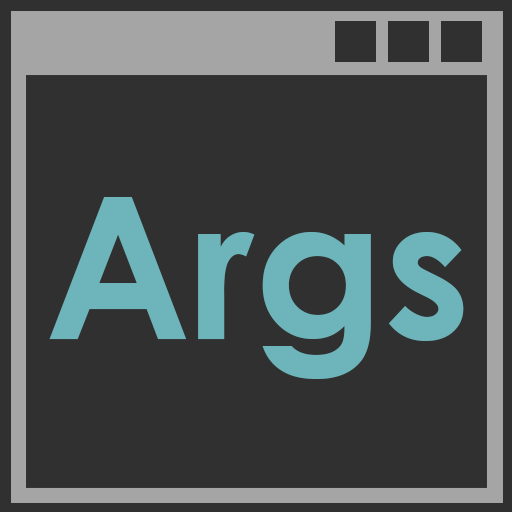
<style>
.page{position:relative;width:512px;height:512px;background:#303030}
.page>*{position:absolute;margin:0}
.t1{font:197px "CenturyGothic-Bold";color:#6db5ba}
</style>
<div class="page">
<p class="t1" style="left:49px;top:197px;width:415px;height:182px">Args</p>
</div>
